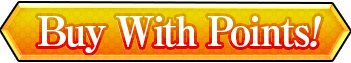
<style>
.page{position:relative;width:351px;height:63px}
.page>*{position:absolute;margin:0}
.t1{font:40px "RyuminPro-ExBold";letter-spacing:-0.06em;color:#fffffa}
.t2{font:40px "RyuminPro-ExBold";letter-spacing:-0.06em;color:#fffffa;font-style:italic}
</style>
<div class="page">
<p class="t1" style="left:38px;top:16px;width:283px;height:37px">Buy With Points<span class="t2">!</span></p>
</div>
